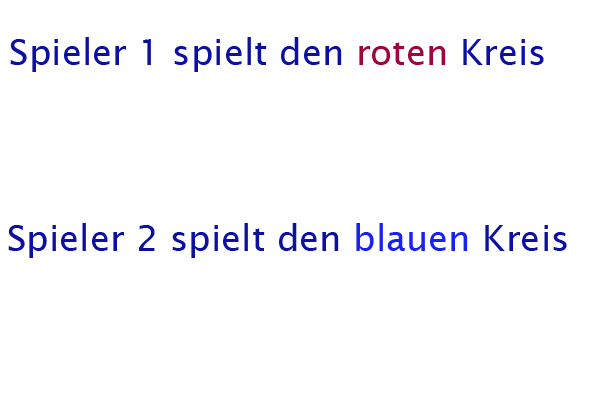
<style>
.page{position:relative;width:600px;height:400px;background:#ffffff}
.page>*{position:absolute;margin:0}
.t1{font:36px "LucidaSans";color:#0b0fa2}
.t2{font:36px "LucidaSans";color:#a1033e}
.t3{font:36px "LucidaSans";color:#191ff7}
</style>
<div class="page">
<p class="t1" style="left:10px;top:37px;width:534px;height:35px">Spieler 1 spielt den <span class="t2">roten </span>Kreis</p>
<p class="t1" style="left:8px;top:223px;width:559px;height:35px">Spieler 2 spielt den <span class="t3">blauen</span> Kreis</p>
</div>
